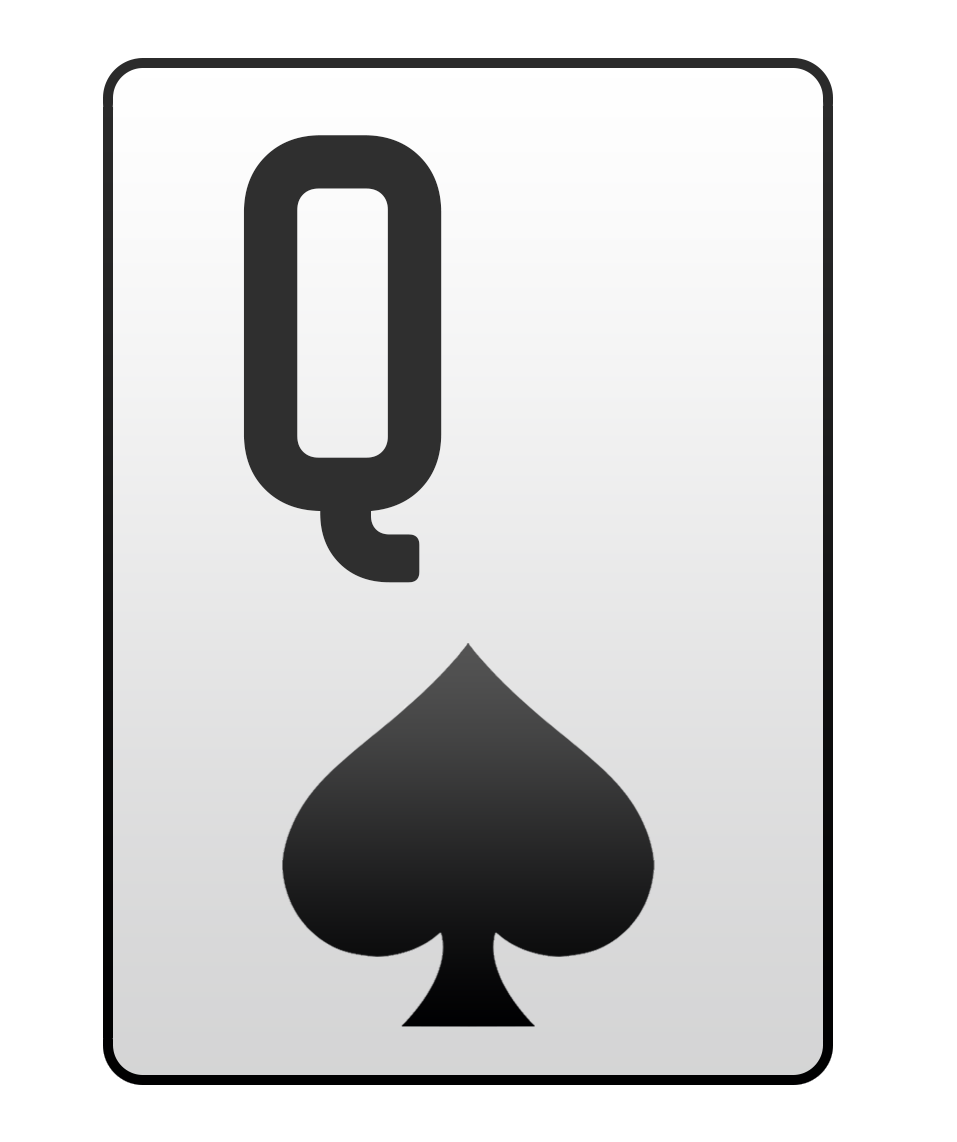
<style>
.page{position:relative;width:957px;height:1142px;background:#ffffff}
.page>*{position:absolute;margin:0}
.t1{font:533.3px "VinSansPro-SemiBold";color:#2f2f2f}
</style>
<div class="page">
<p class="t1" style="left:243px;top:135px;width:199px;height:448px">Q</p>
</div>
